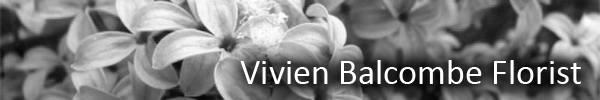
<style>
.page{position:relative;width:600px;height:100px}
.page>*{position:absolute;margin:0}
.t1{font:36px "Calibri";color:#ffffff}
</style>
<div class="page">
<p class="t1" style="left:240px;top:60px;width:341px;height:24px">Vivien Balcombe Florist</p>
</div>
